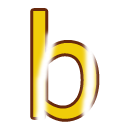
<style>
.page{position:relative;width:128px;height:128px;background:#ffffff}
.page>*{position:absolute;margin:0}
.t1{font:132.9px "SourceHanSansCN-Regular"}
</style>
<div class="page">
<p class="t1" style="left:33px;top:11px;width:64px;height:108px">b</p>
</div>
